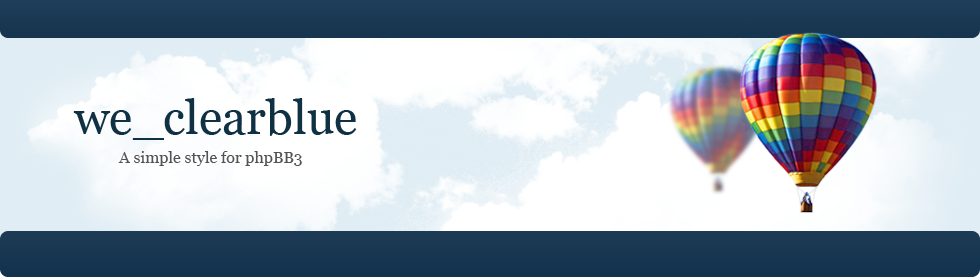
<style>
.page{position:relative;width:980px;height:277px}
.page>*{position:absolute;margin:0}
.t1{font:48px "Georgia";color:#103143}
.t2{font:16px "Georgia";color:#535353}
</style>
<div class="page">
<p class="t1" style="left:73px;top:98px;width:284px;height:42px">we_clearblue</p>
<p class="t2" style="left:118px;top:151px;width:184px;height:15px">A simple style for phpBB3</p>
</div>
